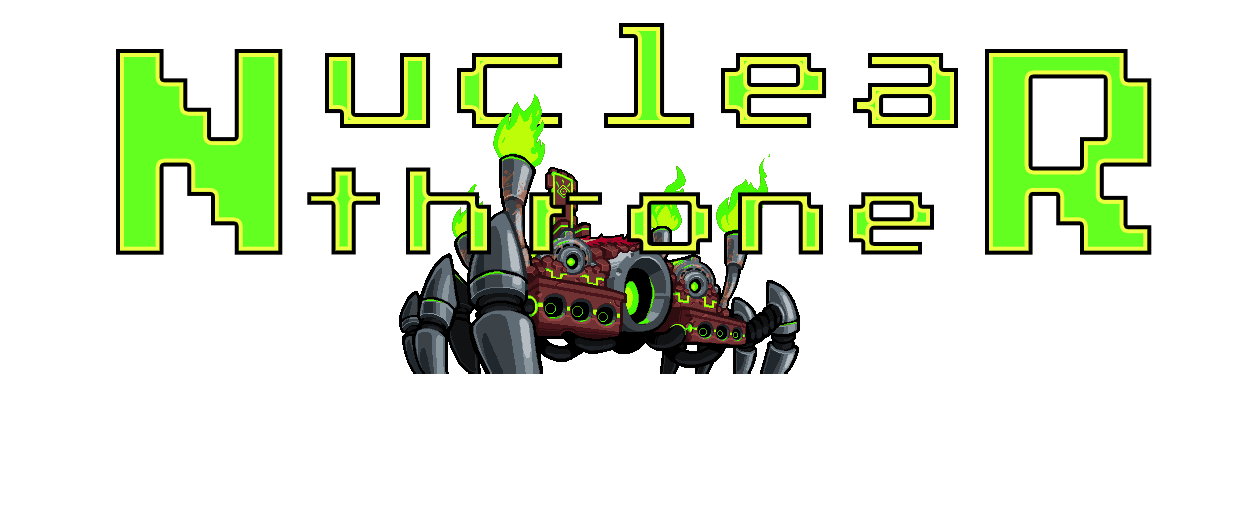
<style>
.page{position:relative;width:1242px;height:510px;background:#ffffff}
.page>*{position:absolute;margin:0}
.t1{font:120px "PressStart2P";letter-spacing:0.1em}
.t2{font:235.2px "PressStart2P";letter-spacing:0.1em;scale:0.81 1}
.t3{font:235.2px "PressStart2P";scale:0.81 1}
.t4{font:99.6px "PressStart2P";letter-spacing:0.14em}
</style>
<div class="page">
<p class="t1" style="left:116px;top:23px;width:1036px;height:232px"><span class="t2">N</span>uclea<span class="t3">R</span></p>
<p class="t4" style="left:307px;top:167px;width:627px;height:88px">throne</p>
</div>
